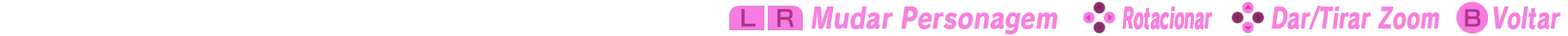
<style>
.page{position:relative;width:1568px;height:36px;background:#ffffff}
.page>*{position:absolute;margin:0}
.t1{font:28.3px "RodinPro-EB";color:#f880de;font-style:italic;scale:0.74 1}
.t2{font:28.3px "RodinPro-EB";color:#f880de;font-style:italic;scale:0.76 1}
.t3{font:28.3px "RodinPro-EB";color:#f880de;font-style:italic;scale:0.86 1}
.t4{font:28.3px "RodinPro-EB";color:#f880de;font-style:italic;scale:0.55 1}
</style>
<div class="page">
<p class="t1" style="left:1272px;top:6px;width:168px;height:23px">Dar/Tirar Zoom</p>
<p class="t2" style="left:1493px;top:6px;width:68px;height:23px">Voltar</p>
<p class="t3" style="left:811px;top:7px;width:247px;height:27px">Mudar Personagem</p>
<p class="t4" style="left:1122px;top:7px;width:90px;height:22px">Rotacionar</p>
<p class="t4" style="left:1122px;top:7px;width:90px;height:22px">Rotacionar</p>
</div>
